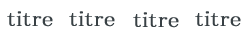
<style>
.page{position:relative;width:252px;height:35px;background:#ffffff}
.page>*{position:absolute;margin:0}
.t1{font:21.5px "MS-PMincho";color:#394145;font-weight:bold;scale:1.13 1}
</style>
<div class="page">
<p class="t1" style="left:7px;top:11px;width:46px;height:16px">titre</p>
<p class="t1" style="left:69px;top:11px;width:46px;height:16px">titre</p>
<p class="t1" style="left:133px;top:12px;width:46px;height:16px">titre</p>
<p class="t1" style="left:195px;top:11px;width:46px;height:16px">titre</p>
</div>
